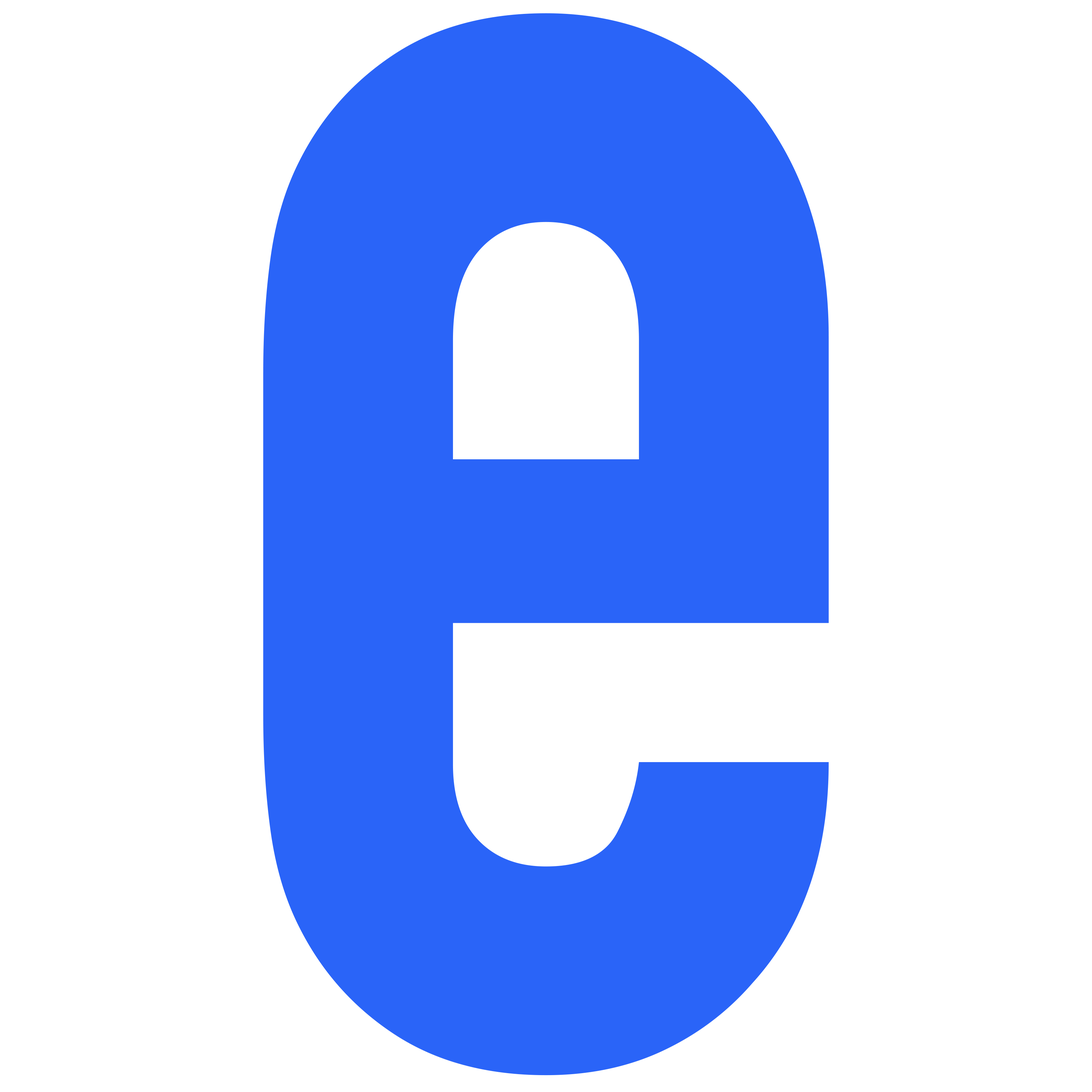
<style>
.page{position:relative;width:1092px;height:1092px;background:#ffffff}
.page>*{position:absolute;margin:0}
.t1{font:2046px "DINCondensed-Bold";color:#2a64f8;scale:0.91 1}
</style>
<div class="page">
<p class="t1" style="left:263px;top:13px;width:566px;height:1062px">e</p>
</div>
